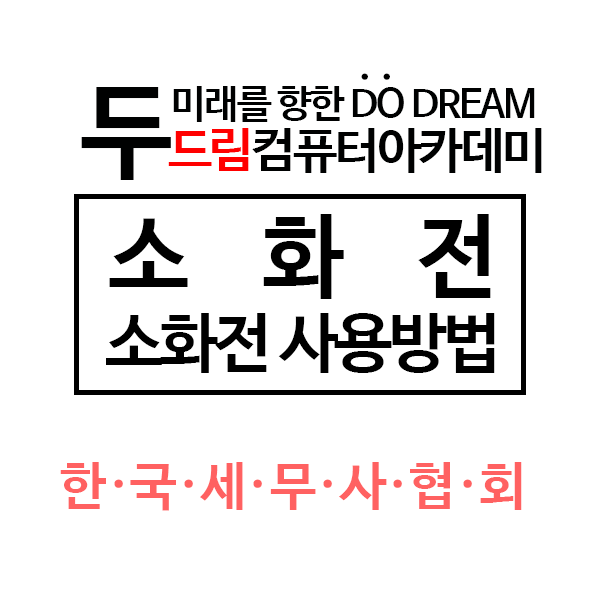
<style>
.page{position:relative;width:600px;height:600px;background:#ffffff}
.page>*{position:absolute;margin:0}
.t1{font:39.1px "NanumBarunGothicBold";letter-spacing:-0.05em;color:#000000}
.t2{font:49.5px "NanumBarunGothicBold";letter-spacing:-0.05em;color:#000101}
.t3{font:104.2px "NanumBarunGothicBold";letter-spacing:-0.05em;color:#000101}
.t4{font:49.5px "NanumBarunGothicBold";letter-spacing:-0.05em;color:#ff0000}
.t5{font:39.1px "NanumBarunGothicBold";letter-spacing:-0.05em;color:#000101}
.t6{font:64.9px "NanumBarunGothicBold";letter-spacing:-0.05em;color:#000000}
.t7{font:90.9px "NanumBarunGothicBold";letter-spacing:0.81em;color:#000000}
.t8{font:52.4px "NanumBarunGothicBold";color:#ff6161}
</style>
<div class="page">
<p class="t1" style="left:361px;top:73px;width:29px;height:7px">· ·</p>
<p class="t2" style="left:81px;top:87px;width:461px;height:93px"><span class="t3">두</span><span class="t4">드림</span>컴퓨터아카데미</p>
<p class="t5" style="left:173px;top:86px;width:362px;height:36px">미래를 향한 DO DREAM</p>
<p class="t6" style="left:106px;top:214px;width:389px;height:159px;text-align:center"><span class="t7">소화전<br></span>소화전 사용방법</p>
<p class="t8" style="left:60px;top:462px;width:462px;height:49px">한·국·세·무·사·협·회</p>
</div>
